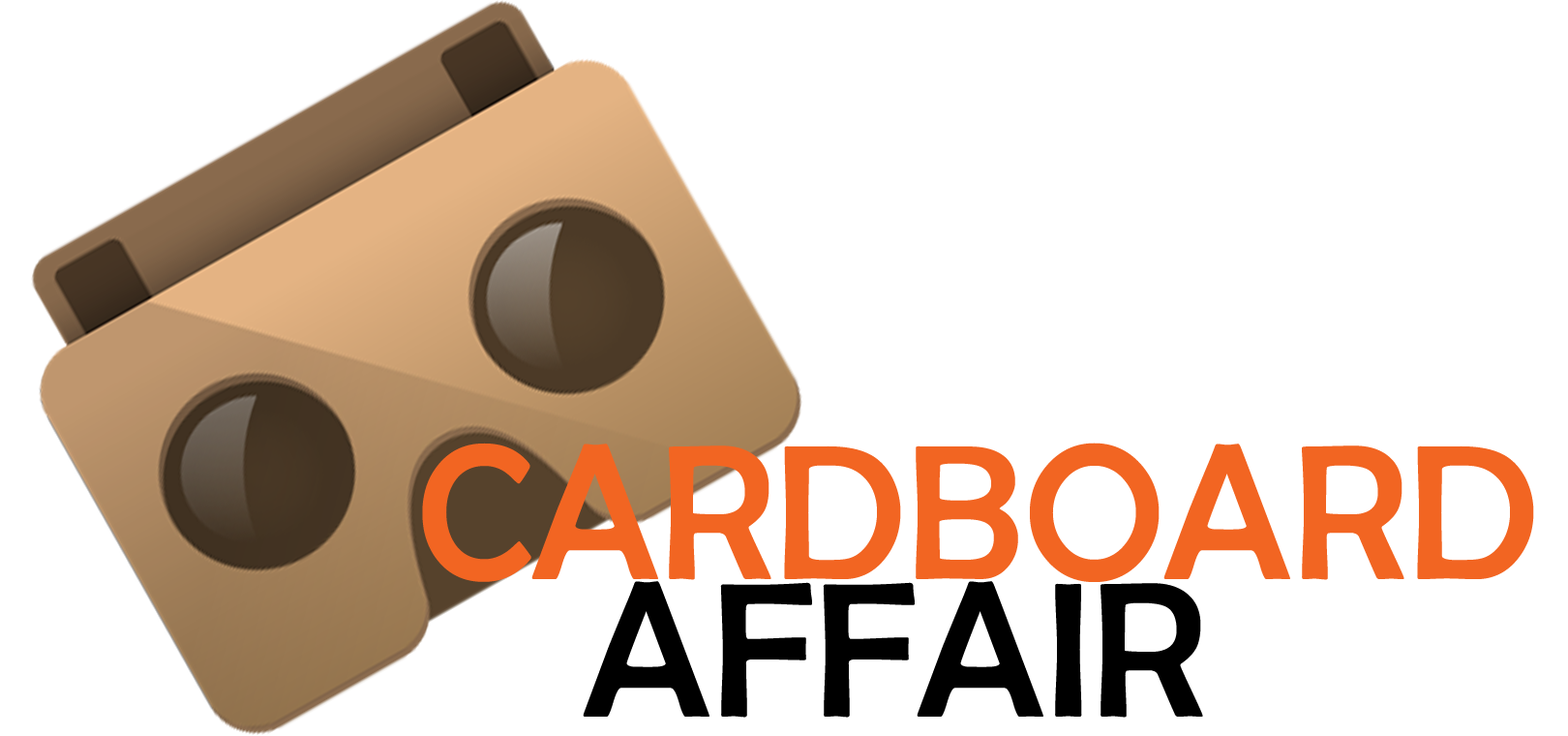
<style>
.page{position:relative;width:1568px;height:736px;background:#ffffff}
.page>*{position:absolute;margin:0}
.t1{font:193.6px "BerlinSansFB-Reg";color:#f26522}
.t2{font:193.6px "BerlinSansFB-Reg";color:#000000}
</style>
<div class="page">
<p class="t1" style="left:422px;top:442px;width:1112px;height:140px">CARDBOARD</p>
<p class="t2" style="left:583px;top:581px;width:620px;height:136px">AFFAIR</p>
</div>
